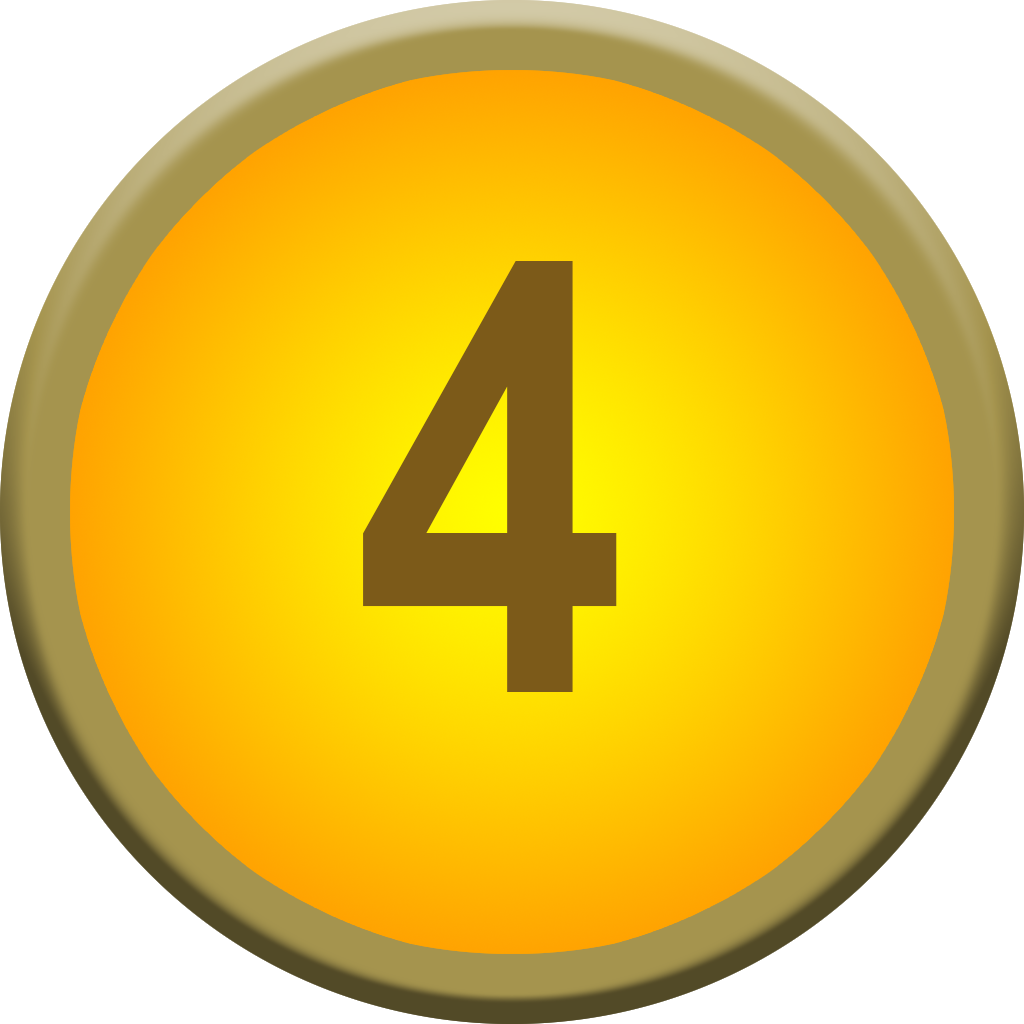
<style>
.page{position:relative;width:1024px;height:1024px;background:#ffffff}
.page>*{position:absolute;margin:0}
.t1{font:600px "ArialNarrow-Bold";color:#7c5a19}
</style>
<div class="page">
<p class="t1" style="left:363px;top:261px;width:254px;height:431px">4</p>
</div>
